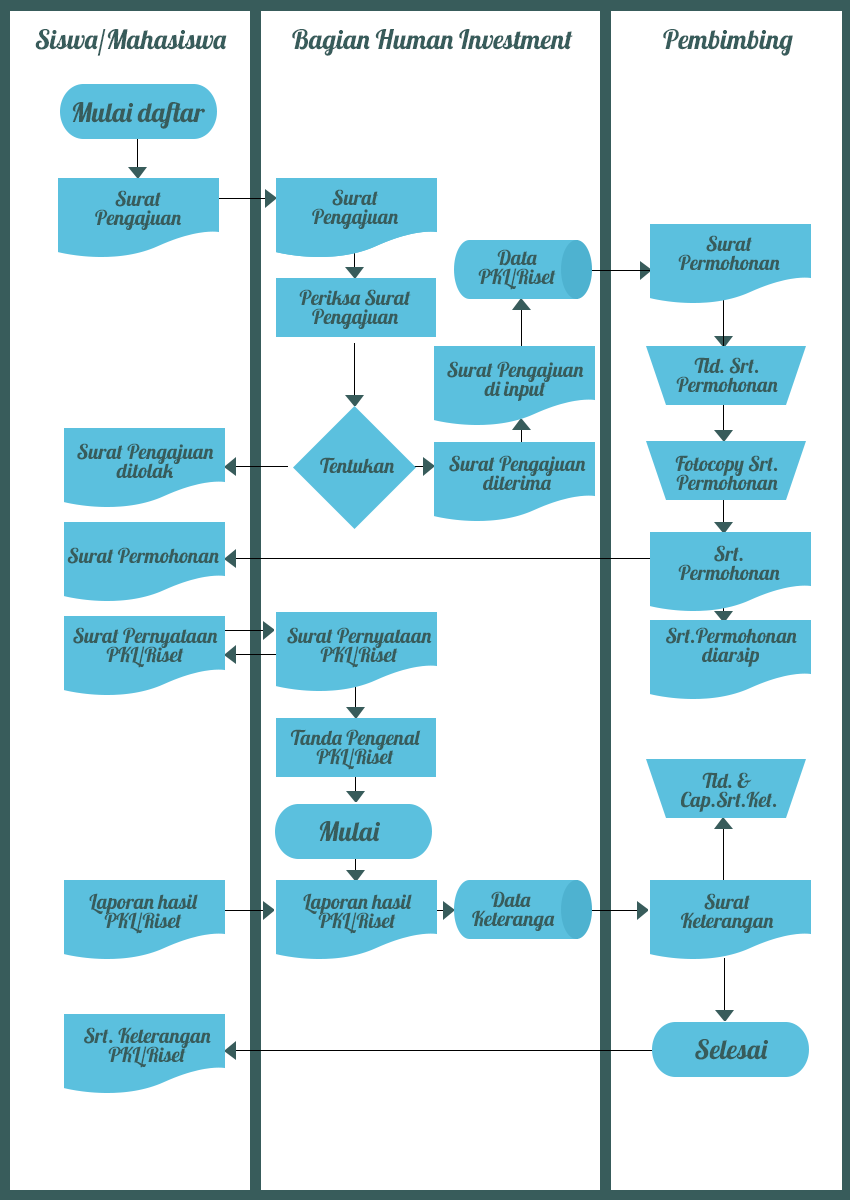
<style>
.page{position:relative;width:850px;height:1200px;background:#ffffff}
.page>*{position:absolute;margin:0}
.t1{font:26.7px "Lobster";color:#385c5b}
.t2{font:20.5px/18.9px "Lobster";color:#385c5b}
.t3{font:20.5px "Lobster";color:#385c5b}
.t4{font:26.8px "Lobster";color:#385c5b}
</style>
<div class="page">
<p class="t1" style="left:35px;top:29px;width:192px;height:27px">Siswa/Mahasiswa</p>
<p class="t1" style="left:292px;top:29px;width:281px;height:27px">Bagian Human Investment</p>
<p class="t1" style="left:663px;top:29px;width:130px;height:27px">Pembimbing</p>
<p class="t1" style="left:72px;top:102px;width:133px;height:27px">Mulai daftar</p>
<p class="t2" style="left:95px;top:190px;width:86px;height:40px;text-align:center">Surat<br>Pengajuan</p>
<p class="t2" style="left:312px;top:189px;width:86px;height:40px;text-align:center">Surat<br>Pengajuan</p>
<p class="t2" style="left:678px;top:235px;width:102px;height:35px;text-align:center">Surat<br>Permohonan</p>
<p class="t2" style="left:478px;top:249px;width:78px;height:41px;text-align:center">Data<br>PKL/Riset</p>
<p class="t2" style="left:299px;top:289px;width:112px;height:40px;text-align:center">Periksa Surat<br>Pengajuan</p>
<p class="t2" style="left:447px;top:361px;width:137px;height:40px;text-align:center">Surat Pengajuan<br>di input</p>
<p class="t2" style="left:676px;top:357px;width:102px;height:35px;text-align:center">Ttd. Srt.<br>Permohonan</p>
<p class="t2" style="left:77px;top:443px;width:137px;height:35px;text-align:center">Surat Pengajuan<br>ditolak</p>
<p class="t3" style="left:320px;top:457px;width:74px;height:16px">Tentukan</p>
<p class="t2" style="left:449px;top:455px;width:137px;height:35px;text-align:center">Surat Pengajuan<br>diterima</p>
<p class="t2" style="left:675px;top:455px;width:103px;height:35px;text-align:center">Fotocopy Srt.<br>Permohonan</p>
<p class="t2" style="left:678px;top:545px;width:102px;height:35px;text-align:center">Srt.<br>Permohonan</p>
<p class="t3" style="left:67px;top:547px;width:152px;height:17px">Surat Permohonan</p>
<p class="t2" style="left:73px;top:627px;width:145px;height:41px;text-align:center">Surat Pernyataan<br>PKL/Riset</p>
<p class="t2" style="left:287px;top:627px;width:145px;height:41px;text-align:center">Surat Pernyataan<br>PKL/Riset</p>
<p class="t2" style="left:666px;top:627px;width:131px;height:40px;text-align:center">Srt.Permohonan<br>diarsip</p>
<p class="t2" style="left:290px;top:729px;width:131px;height:41px;text-align:center">Tanda Pengenal<br>PKL/Riset</p>
<p class="t2" style="left:681px;top:772px;width:96px;height:40px;text-align:center">Ttd. &amp; <br>Cap.Srt.Ket.</p>
<p class="t4" style="left:319px;top:821px;width:61px;height:21px">Mulai</p>
<p class="t2" style="left:89px;top:893px;width:109px;height:41px;text-align:center">Laporan hasil<br>PKL/Riset</p>
<p class="t2" style="left:303px;top:893px;width:109px;height:41px;text-align:center">Laporan hasil<br>PKL/Riset</p>
<p class="t2" style="left:472px;top:891px;width:83px;height:40px;text-align:center">Data <br>Keteranga</p>
<p class="t2" style="left:680px;top:893px;width:94px;height:40px;text-align:center">Surat<br>Keterangan</p>
<p class="t2" style="left:84px;top:1027px;width:127px;height:41px;text-align:center">Srt. Keterangan<br>PKL/Riset</p>
<p class="t4" style="left:695px;top:1039px;width:73px;height:21px">Selesai</p>
</div>
